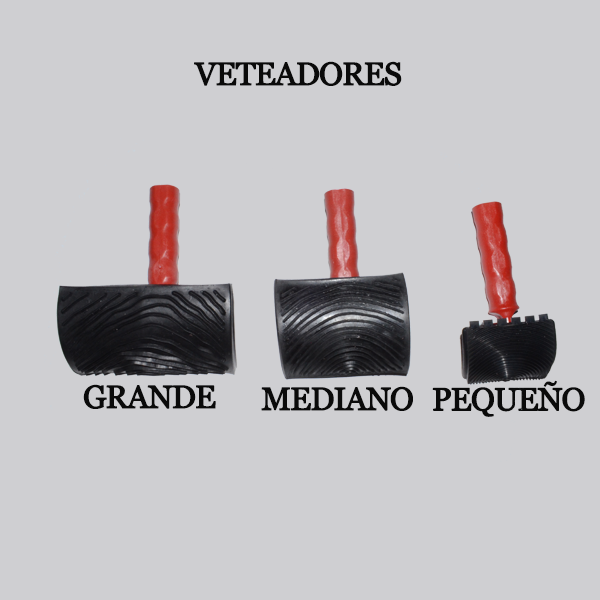
<style>
.page{position:relative;width:600px;height:600px;background:#cfcfd2}
.page>*{position:absolute;margin:0}
.t1{font:32px "Georgia";letter-spacing:-0.05em;color:#0a0a0a;font-weight:bold}
.t2{font:31.8px "Georgia";letter-spacing:-0.05em;color:#0a0a0a;font-weight:bold}
</style>
<div class="page">
<p class="t1" style="left:194px;top:61px;width:208px;height:25px">VETEADORES</p>
<p class="t1" style="left:83px;top:384px;width:133px;height:25px">GRANDE</p>
<p class="t1" style="left:261px;top:386px;width:152px;height:25px">MEDIANO</p>
<p class="t2" style="left:432px;top:380px;width:153px;height:37px">PEQUEÑO</p>
</div>
